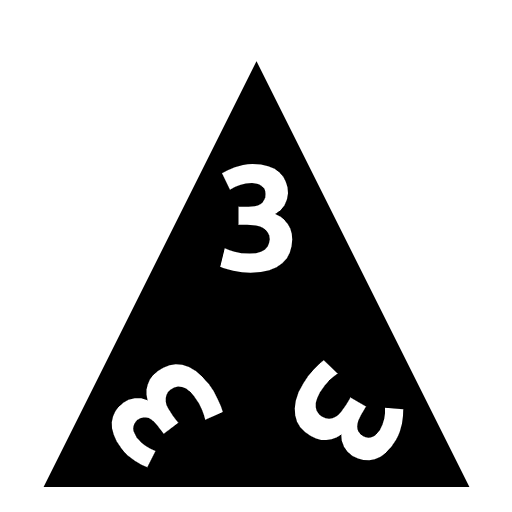
<style>
.page{position:relative;width:512px;height:512px;background:#ffffff}
.page>*{position:absolute;margin:0}
.t1{font:150px "Ubuntu-Bold";color:#ffffff}
</style>
<div class="page">
<p class="t1" style="left:220px;top:164px;width:73px;height:109px">3</p>
<p class="t1" style="left:111px;top:363px;width:112px;height:105px;rotate:-127deg">3</p>
<p class="t1" style="left:293px;top:360px;width:111px;height:101px;rotate:121deg">3</p>
</div>
